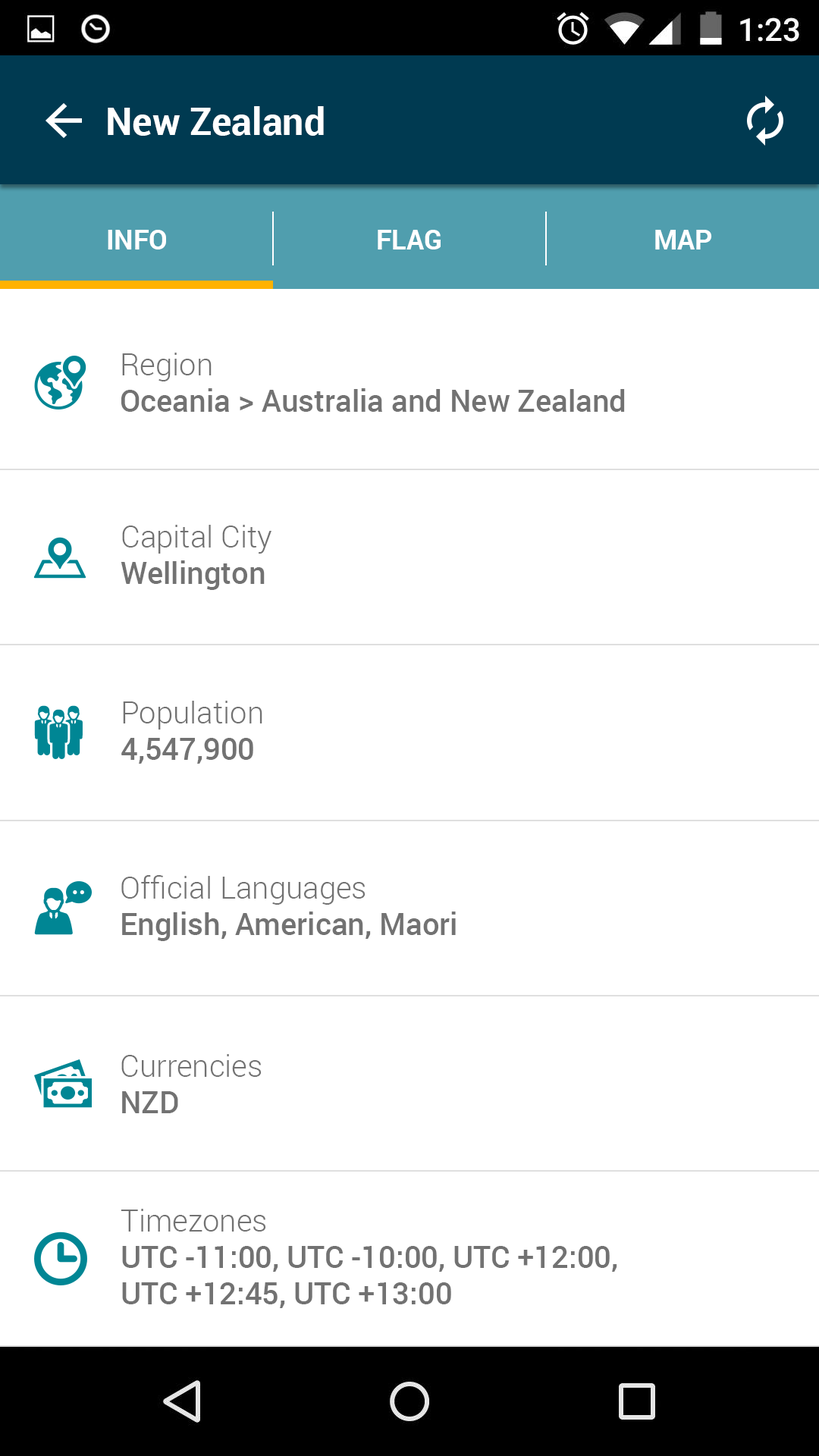
<style>
.page{position:relative;width:819px;height:1456px;background:#ffffff}
.page>*{position:absolute;margin:0}
.t1{font:37.9px "Roboto-Bold";color:#ffffff}
.t2{font:27.3px "Roboto-Bold";color:#ffffff}
.t3{font:30.3px "Roboto-Medium";color:#727272}
.t4{font:30.3px "Roboto-Light";color:#727272}
</style>
<div class="page">
<p class="t1" style="left:108px;top:106px;width:216px;height:30px">New Zealand</p>
<p class="t2" style="left:108px;top:230px;width:58px;height:19px">INFO</p>
<p class="t2" style="left:378px;top:230px;width:63px;height:19px">FLAG</p>
<p class="t2" style="left:655px;top:230px;width:57px;height:19px">MAP</p>
<p class="t3" style="left:121px;top:353px;width:504px;height:59px"><span class="t4">Region<br></span>Oceania &gt; Australia and New Zealand</p>
<p class="t4" style="left:121px;top:525px;width:150px;height:65px">Capital City<br><span class="t3">Wellington</span></p>
<p class="t4" style="left:121px;top:701px;width:141px;height:63px">Population<br><span class="t3">4,547,900</span></p>
<p class="t3" style="left:121px;top:875px;width:335px;height:66px"><span class="t4">Official Languages<br></span>English, American, Maori</p>
<p class="t4" style="left:121px;top:1054px;width:141px;height:59px">Currencies<br><span class="t3">NZD</span></p>
<p class="t3" style="left:121px;top:1209px;width:496px;height:99px"><span class="t4">Timezones<br></span>UTC -11:00, UTC -10:00, UTC +12:00, <br>UTC +12:45, UTC +13:00</p>
</div>
